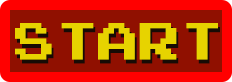
<style>
.page{position:relative;width:232px;height:82px;background:#901000}
.page>*{position:absolute;margin:0}
.t1{font:41.6px "PressStartReg";color:#e7d300}
.t2{font:41.6px "PressStartReg"}
</style>
<div class="page">
<p class="t1" style="left:15px;top:23px;width:203px;height:37px">START</p>
<p class="t2" style="left:17px;top:27px;width:203px;height:37px">START</p>
</div>
